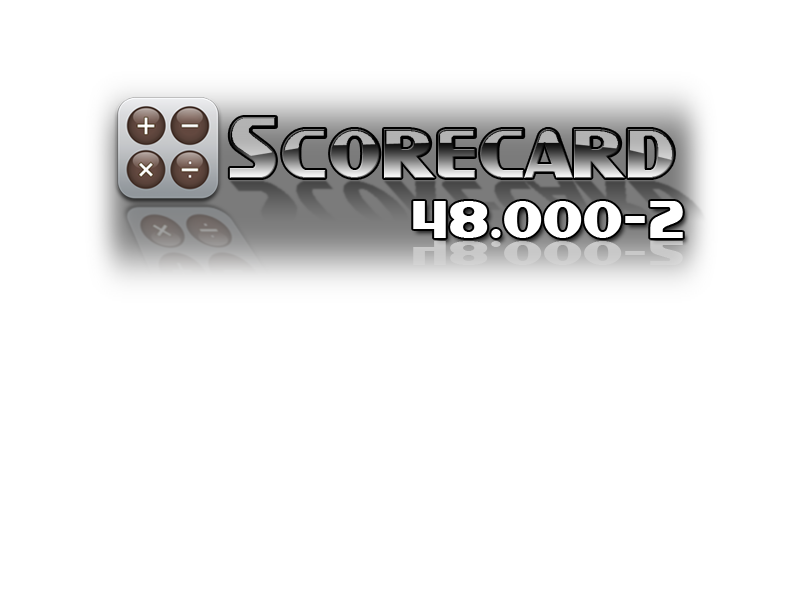
<style>
.page{position:relative;width:800px;height:600px;background:#ffffff}
.page>*{position:absolute;margin:0}
.t1{font:92.1px "SFIntellivised";letter-spacing:0.01em;color:#000000}
.t2{font:55.6px "SFIntellivised";letter-spacing:0.01em;color:#ffffff}
</style>
<div class="page">
<p class="t1" style="left:229px;top:117px;width:445px;height:61px">Scorecard</p>
<p class="t2" style="left:413px;top:201px;width:270px;height:37px">48.000-2</p>
</div>
